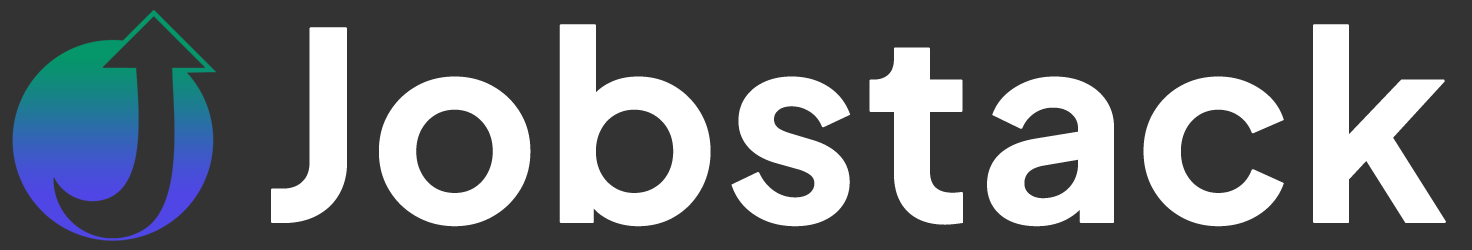
<style>
.page{position:relative;width:1472px;height:250px;background:#333333}
.page>*{position:absolute;margin:0}
.t1{font:260px "PlusJakartaSans-Bold";letter-spacing:-0.005em;color:#ffffff;font-weight:bold}
</style>
<div class="page">
<p class="t1" style="left:271px;top:24px;width:1175px;height:203px">Jobstack</p>
</div>
